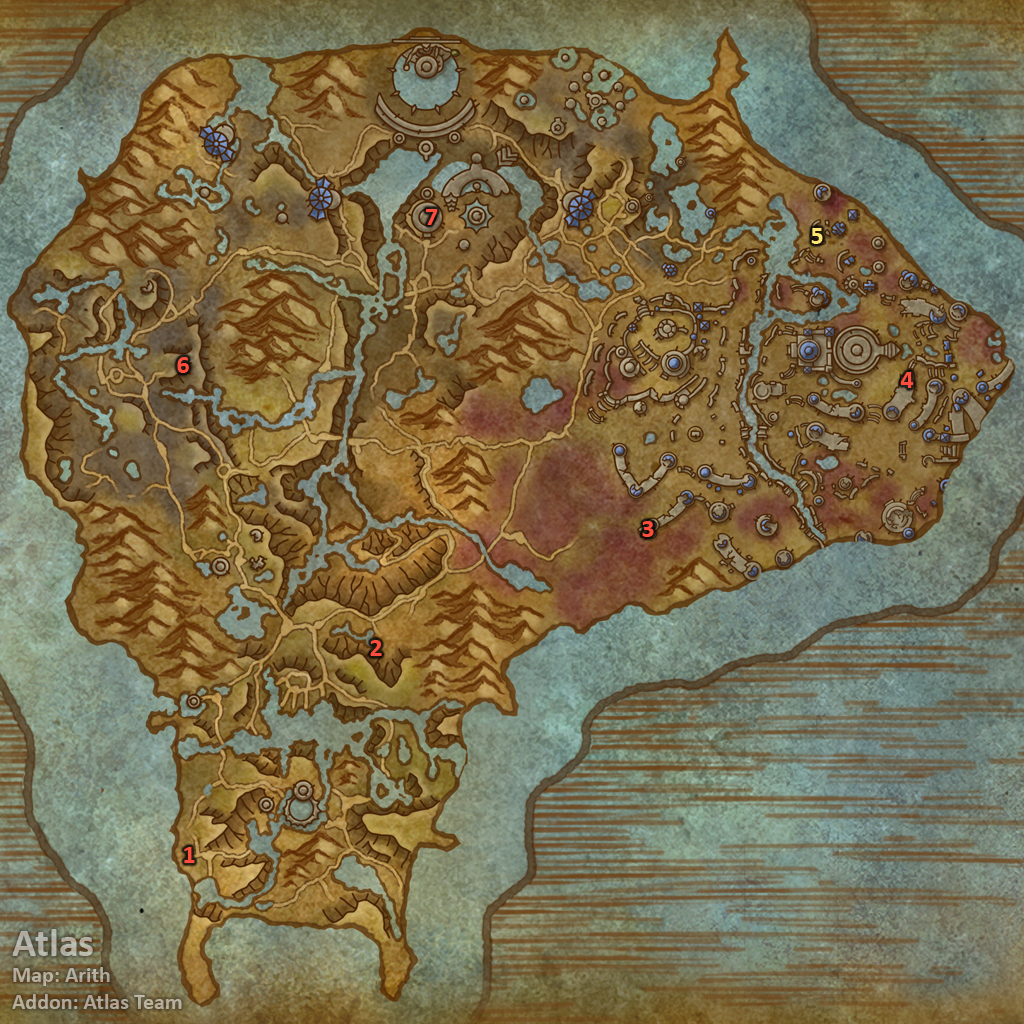
<style>
.page{position:relative;width:1024px;height:1024px}
.page>*{position:absolute;margin:0}
.t1{font:26px "Calibri-Bold";color:#ff4c3c}
.t2{font:26px "Calibri-Bold";color:#fee570}
.t3{font:22px "Calibri-Bold";color:#b4ae9f}
.t4{font:40px "Calibri-Bold";color:#b4ae9f}
</style>
<div class="page">
<p class="t1" style="left:426px;top:209px;width:12px;height:16px">7</p>
<p class="t2" style="left:811px;top:228px;width:12px;height:16px">5</p>
<p class="t1" style="left:177px;top:357px;width:12px;height:16px">6</p>
<p class="t1" style="left:900px;top:372px;width:14px;height:16px">4</p>
<p class="t1" style="left:642px;top:521px;width:12px;height:16px">3</p>
<p class="t1" style="left:370px;top:640px;width:12px;height:16px">2</p>
<p class="t1" style="left:184px;top:847px;width:11px;height:16px">1</p>
<p class="t3" style="left:12px;top:929px;width:170px;height:80px"><span class="t4">Atlas<br></span>Map: Arith<br>Addon: Atlas Team</p>
</div>
